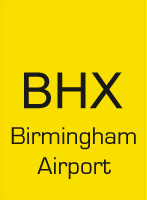
<style>
.page{position:relative;width:147px;height:200px;background:#f9df00}
.page>*{position:absolute;margin:0}
.t1{font:50px "ArialMT";color:#191919}
.t2{font:25px "EurostileRegular";color:#191919}
</style>
<div class="page">
<p class="t1" style="left:24px;top:72px;width:99px;height:37px">BHX</p>
<p class="t2" style="left:11px;top:127px;width:125px;height:52px;text-align:center">Birmingham<br>Airport</p>
</div>
